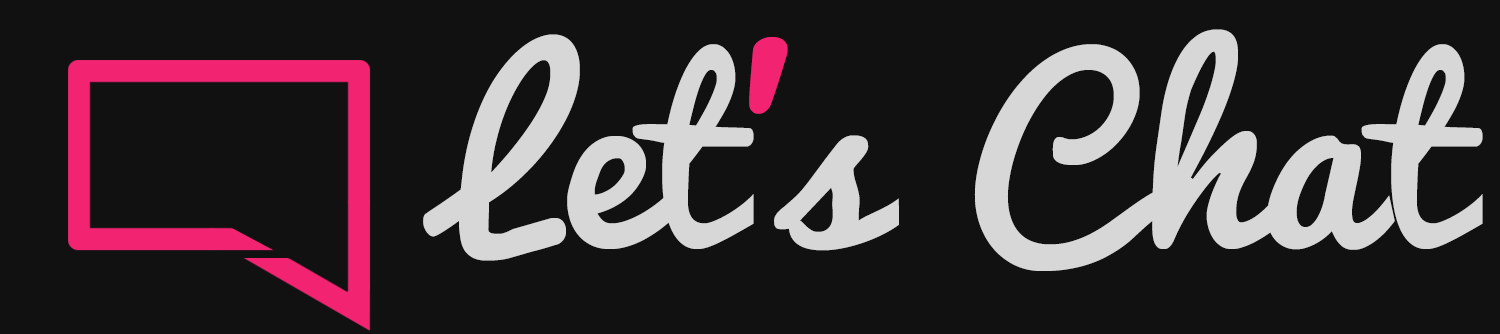
<style>
.page{position:relative;width:1500px;height:334px;background:#111111}
.page>*{position:absolute;margin:0}
.t1{font:233.9px "Pacifico";color:#d7d7d7}
.t2{font:233.9px "Pacifico";letter-spacing:-0.114em;color:#f22472}
.t3{font:233.9px "Pacifico";letter-spacing:-0.114em;color:#d7d7d7}
</style>
<div class="page">
<p class="t1" style="left:423px;top:29px;width:1060px;height:242px">Let<span class="t2">’</span><span class="t3">s</span>  Chat</p>
</div>
